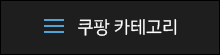
<style>
.page{position:relative;width:220px;height:55px;background:#1e1e1e}
.page>*{position:absolute;margin:0}
.t1{font:18px "IBMPlexSansKR";color:#fefefe}
</style>
<div class="page">
<p class="t1" style="left:78px;top:19px;width:99px;height:17px">쿠팡 카테고리</p>
</div>
